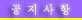
<style>
.page{position:relative;width:82px;height:20px}
.page>*{position:absolute;margin:0}
.t1{font:12px "BatangChe";color:#ffffff;scale:0.9 1}
</style>
<div class="page">
<p class="t1" style="left:11px;top:4px;width:59px;height:12px">공 지 사 항</p>
</div>
